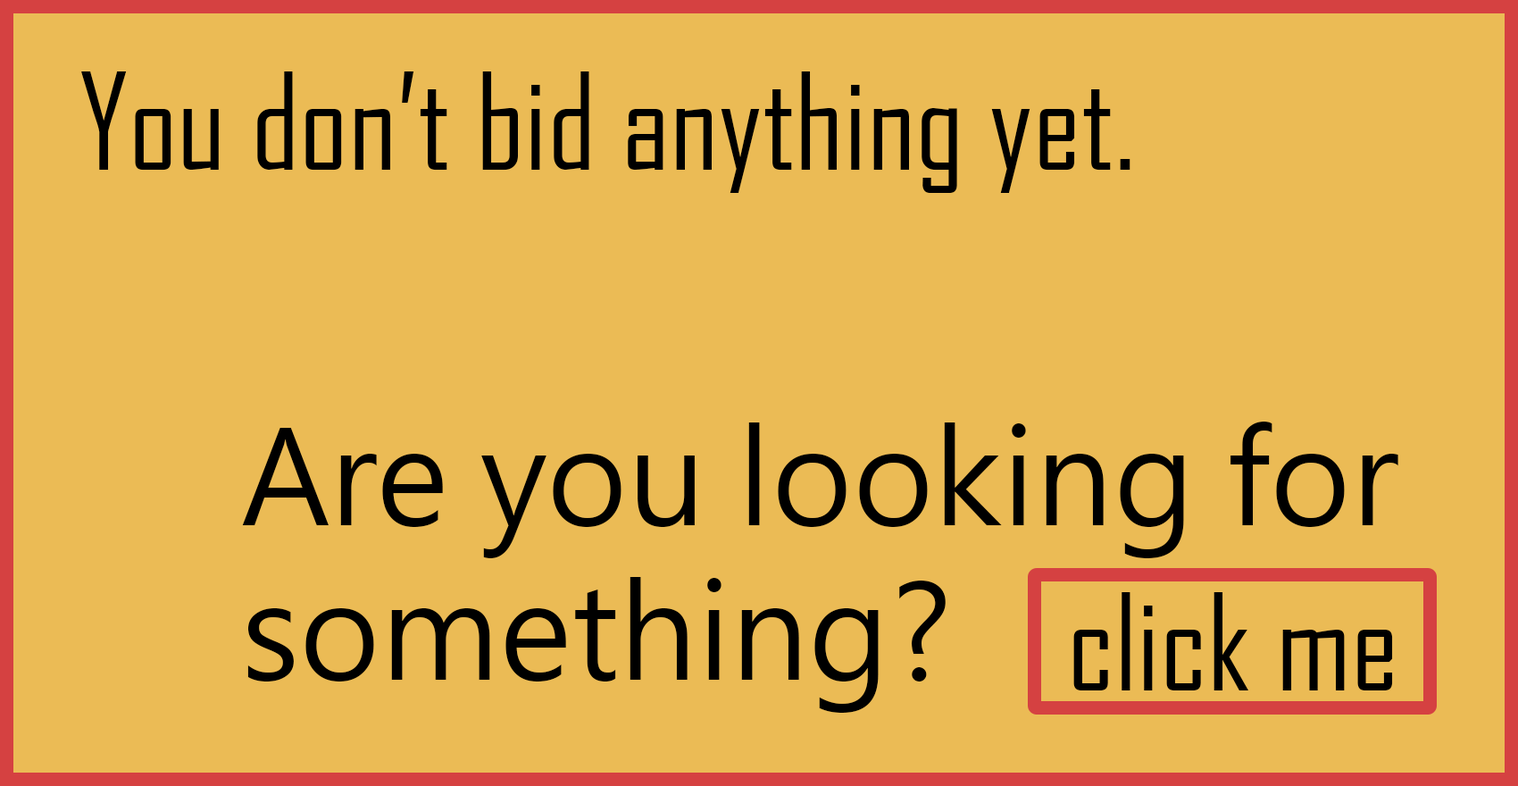
<style>
.page{position:relative;width:1518px;height:786px;background:#ebbb55}
.page>*{position:absolute;margin:0}
.t1{font:128.6px "AgencyFB-Reg";color:#000000}
.t2{font:128.6px "MicrosoftJhengHeiRegular";color:#000000}
</style>
<div class="page">
<p class="t1" style="left:81px;top:71px;width:1049px;height:122px">You don’t bid anything yet.</p>
<p class="t2" style="left:242px;top:421px;width:1156px;height:291px">Are you looking for <br>something?</p>
<p class="t1" style="left:1073px;top:592px;width:320px;height:98px">click me</p>
</div>
